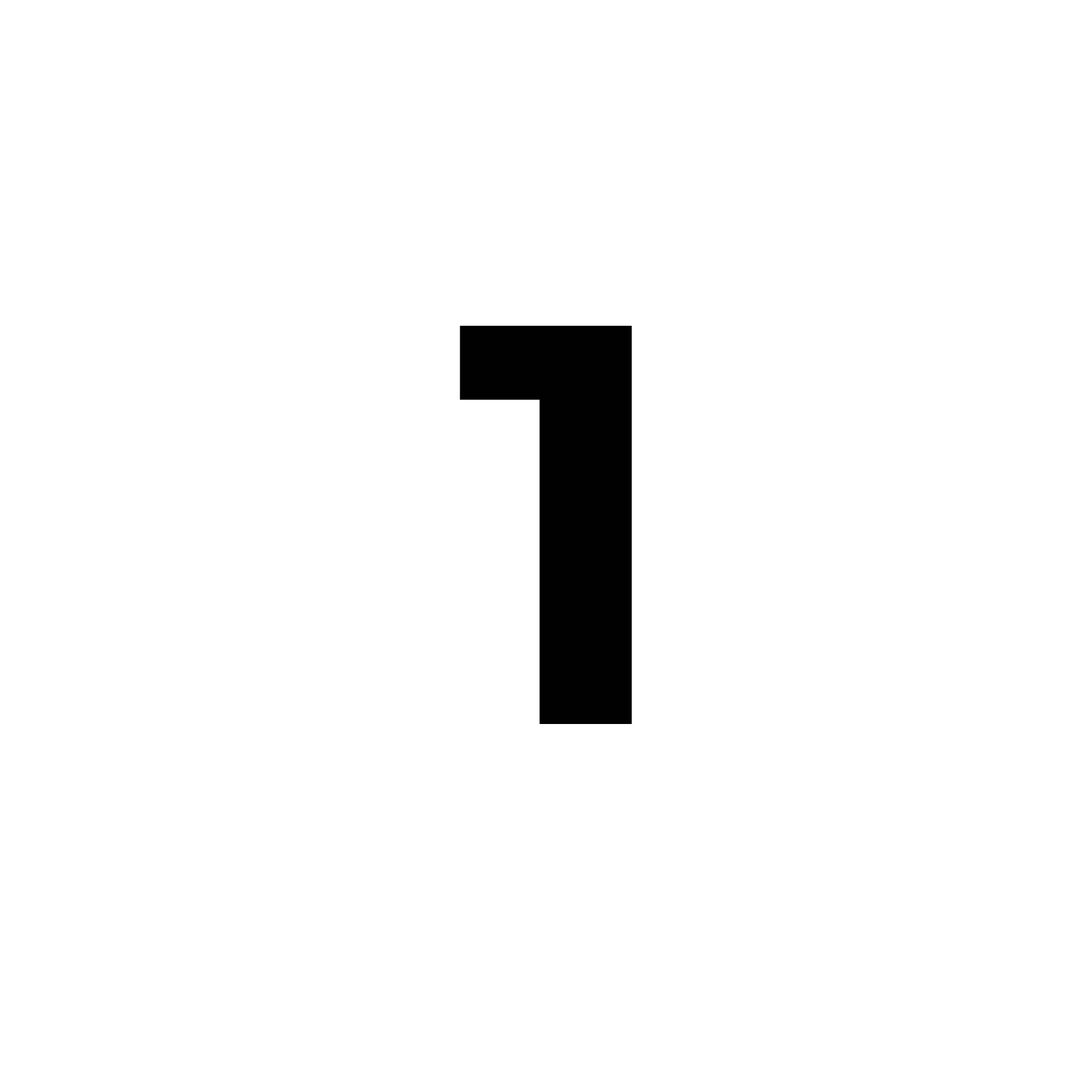
<style>
.page{position:relative;width:1092px;height:1092px;background:#ffffff}
.page>*{position:absolute;margin:0}
.t1{font:568.7px "Montserrat-Bold";color:#010101}
</style>
<div class="page">
<p class="t1" style="left:460px;top:325px;width:172px;height:399px">1</p>
</div>
